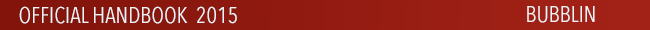
<style>
.page{position:relative;width:650px;height:30px}
.page>*{position:absolute;margin:0}
.t1{font:22.4px "AvenirNextCondensed-Regular";color:#eff3f6}
</style>
<div class="page">
<p class="t1" style="left:19px;top:6px;width:169px;height:18px">OFFICIAL HANDBOOK</p>
<p class="t1" style="left:197px;top:6px;width:40px;height:18px">2015</p>
<p class="t1" style="left:527px;top:6px;width:68px;height:17px">BUBBLIN</p>
</div>
